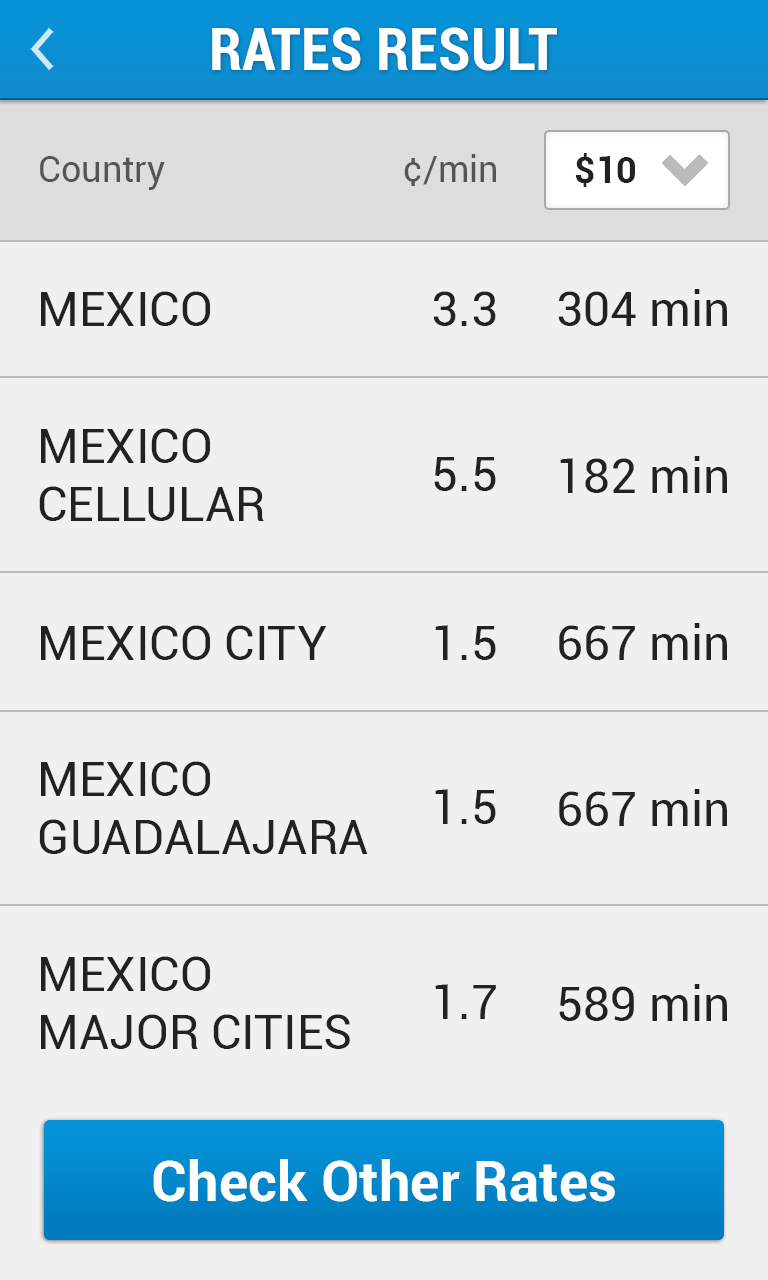
<style>
.page{position:relative;width:768px;height:1280px;background:#f0f0f0}
.page>*{position:absolute;margin:0}
.t1{font:60px "Roboto-BoldCondensed";color:#ffffff}
.t2{font:36px "Roboto-Regular";color:#555555}
.t3{font:36px "Roboto-Bold";color:#222222}
.t4{font:48px "Roboto-Regular";color:#222222}
.t5{font:56px "Roboto-Bold";color:#ffffff}
</style>
<div class="page">
<p class="t1" style="left:212px;top:27px;width:345px;height:44px">RATES RESULT</p>
<p class="t2" style="left:40px;top:156px;width:125px;height:34px">Country</p>
<p class="t2" style="left:404px;top:154px;width:92px;height:32px">¢/min</p>
<p class="t3" style="left:575px;top:153px;width:60px;height:34px">$10</p>
<p class="t4" style="left:41px;top:291px;width:169px;height:35px">MEXICO</p>
<p class="t4" style="left:433px;top:291px;width:63px;height:35px">3.3</p>
<p class="t4" style="left:558px;top:289px;width:169px;height:37px">304 min</p>
<p class="t4" style="left:39px;top:428px;width:225px;height:93px">MEXICO<br>CELLULAR</p>
<p class="t4" style="left:434px;top:457px;width:62px;height:34px">5.5</p>
<p class="t4" style="left:560px;top:456px;width:167px;height:37px">182 min</p>
<p class="t4" style="left:41px;top:625px;width:286px;height:35px">MEXICO CITY</p>
<p class="t4" style="left:435px;top:625px;width:61px;height:35px">1.5</p>
<p class="t4" style="left:559px;top:623px;width:168px;height:37px">667 min</p>
<p class="t4" style="left:39px;top:761px;width:329px;height:93px">MEXICO<br>GUADALAJARA</p>
<p class="t4" style="left:435px;top:789px;width:61px;height:35px">1.5</p>
<p class="t4" style="left:559px;top:789px;width:168px;height:37px">667 min</p>
<p class="t4" style="left:41px;top:956px;width:309px;height:93px">MEXICO<br>MAJOR CITIES</p>
<p class="t4" style="left:435px;top:984px;width:61px;height:35px">1.7</p>
<p class="t4" style="left:559px;top:984px;width:168px;height:37px">589 min</p>
<p class="t5" style="left:153px;top:1159px;width:462px;height:43px">Check Other Rates</p>
</div>
